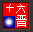
<style>
.page{position:relative;width:33px;height:32px;background:#f20000}
.page>*{position:absolute;margin:0}
.t1{font:10.4px "SimSun";color:#ffffff}
.t2{font:11.7px "SimSun";color:#ffffff}
</style>
<div class="page">
<p class="t1" style="left:6px;top:4px;width:19px;height:9px">十六</p>
<p class="t2" style="left:16px;top:15px;width:11px;height:12px">晋</p>
</div>
